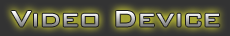
<style>
.page{position:relative;width:230px;height:36px}
.page>*{position:absolute;margin:0}
.t1{font:30px "BankGothicBT-Medium"}
</style>
<div class="page">
<p class="t1" style="left:11px;top:11px;width:209px;height:16px">Video Device</p>
</div>
